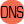
<style>
.page{position:relative;width:24px;height:24px;background:#f26c4f}
.page>*{position:absolute;margin:0}
.t1{font:18px "EurostileRegular";color:#000000;scale:0.67 1}
</style>
<div class="page">
<p class="t1" style="left:1px;top:6px;width:23px;height:12px">DNS</p>
</div>
